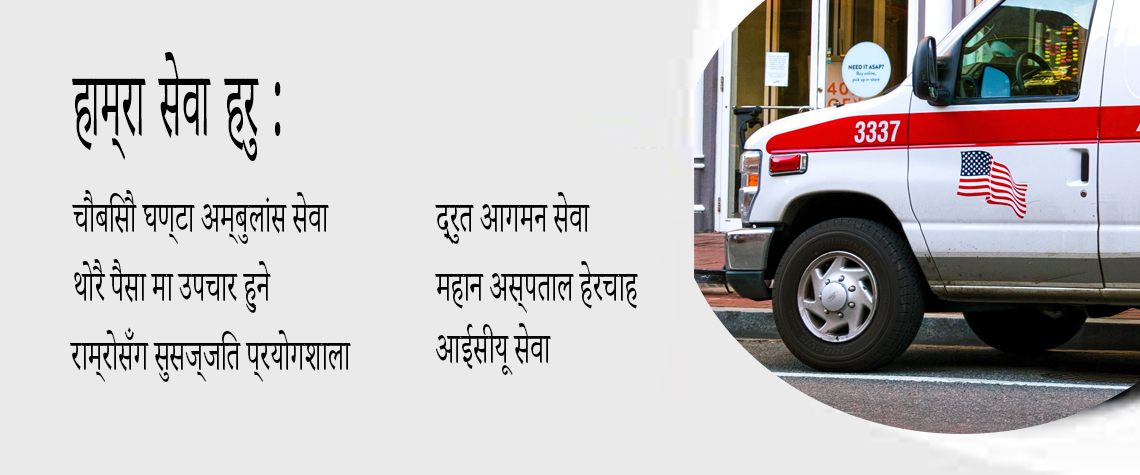
<style>
.page{position:relative;width:1140px;height:475px;background:#eaeaea}
.page>*{position:absolute;margin:0}
.t1{font:112.6px "AdobeDevanagari-Regular";color:#000000;scale:0.4 1}
.t2{font:112.6px "MyriadPro-Regular";color:#000000;scale:0.4 1}
.t3{font:54.3px "AdobeDevanagari-Regular";color:#000000;scale:0.57 1}
</style>
<div class="page">
<p class="t1" style="left:72px;top:52px;width:209px;height:109px">हाम्रा सेवा हरु <span class="t2">:</span></p>
<p class="t3" style="left:72px;top:190px;width:257px;height:54px">चौबिसौ घण्टा अम्बुलांस सेवा</p>
<p class="t3" style="left:435px;top:192px;width:155px;height:52px">द्रुत आगमन सेवा</p>
<p class="t3" style="left:74px;top:259px;width:197px;height:54px">थोरै पैसा मा उपचार हुने</p>
<p class="t3" style="left:435px;top:261px;width:203px;height:52px">महान अस्पताल हेरचाह</p>
<p class="t3" style="left:70px;top:327px;width:281px;height:55px">राम्रोसँग सुसज्जित प्रयोगशाला</p>
<p class="t3" style="left:436px;top:323px;width:115px;height:52px">आईसीयू सेवा</p>
</div>
